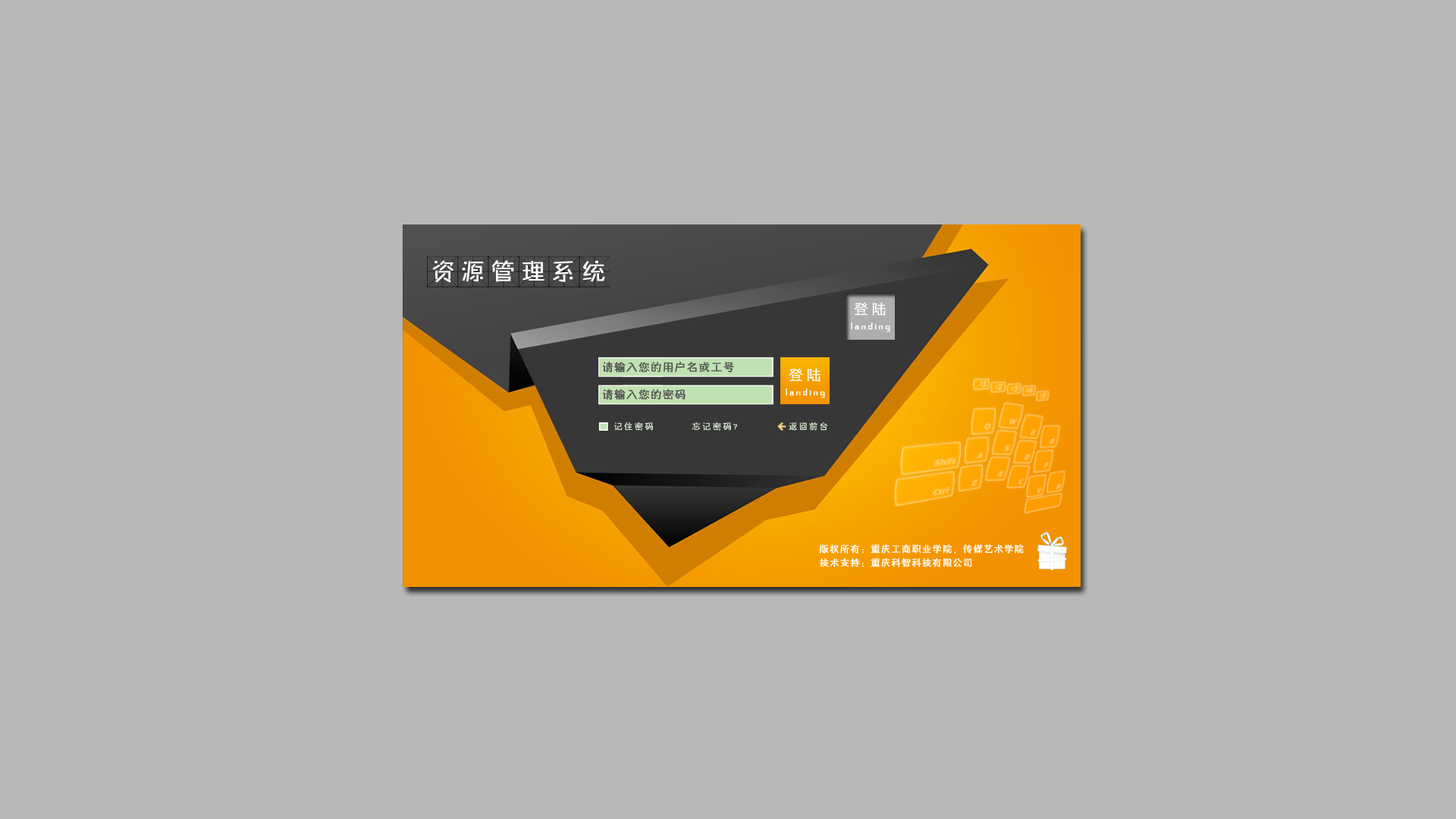
<style>
.page{position:relative;width:1456px;height:819px;background:#b8b8b8}
.page>*{position:absolute;margin:0}
.t1{font:22.7px "FZZHYJW--GB1-0";letter-spacing:0.3em;color:#ffffff;font-weight:bold}
.t2{font:14.3px "FZZHYJW--GB1-0";letter-spacing:0.2em;color:#ffffff;font-weight:bold}
.t3{font:10.7px "FZZHYJW--GB1-0";letter-spacing:0.2em;color:#ffffff;font-weight:bold}
.t4{font:10.7px "FZZHYJW--GB1-0";letter-spacing:0.1em;color:#4e4c4d;font-weight:bold}
.t5{font:8.3px "FZZHYJW--GB1-0";letter-spacing:0.2em;color:#dff0d8;font-weight:bold}
.t6{font:9.1px/13.6px "FZZHYJW--GB1-0";letter-spacing:0.1em;color:#ffffff;font-weight:bold}
</style>
<div class="page">
<p class="t1" style="left:432px;top:260px;width:173px;height:23px">资源管理系统</p>
<p class="t2" style="left:854px;top:302px;width:32px;height:14px">登陆</p>
<p class="t3" style="left:851px;top:322px;width:39px;height:10px">landing</p>
<p class="t4" style="left:602px;top:362px;width:132px;height:10px">请输入您的用户名或工号</p>
<p class="t2" style="left:789px;top:368px;width:32px;height:14px">登陆</p>
<p class="t4" style="left:602px;top:389px;width:84px;height:11px">请输入您的密码</p>
<p class="t3" style="left:786px;top:388px;width:39px;height:10px">landing</p>
<p class="t5" style="left:613px;top:422px;width:41px;height:9px">记住密码</p>
<p class="t5" style="left:692px;top:422px;width:45px;height:9px">忘记密码?</p>
<p class="t5" style="left:789px;top:422px;width:39px;height:9px">返回前台</p>
<p class="t6" style="left:819px;top:544px;width:205px;height:23px">版权所有：重庆工商职业学院，传媒艺术学院      <br>技术支持：重庆科智科技有限公司</p>
</div>
